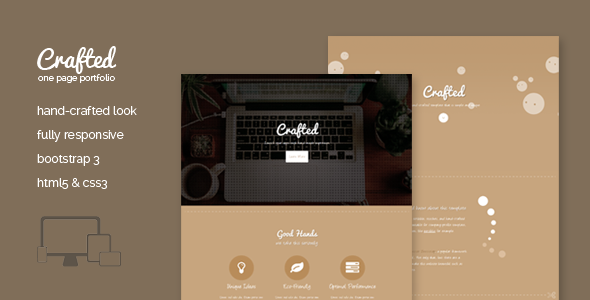
<style>
.page{position:relative;width:590px;height:300px;background:#806e59}
.page>*{position:absolute;margin:0}
.t1{font:24px "Pacifico";color:#ffffff}
.t2{font:9px "Raleway-Regular";color:#ffffff}
.t3{font:12px/24px "Raleway-Regular";color:#ffffff}
</style>
<div class="page">
<p class="t1" style="left:37px;top:46px;width:80px;height:28px">Crafted</p>
<p class="t2" style="left:38px;top:74px;width:77px;height:9px">one page portfolio</p>
<p class="t3" style="left:37px;top:106px;width:100px;height:83px">hand-crafted look<br>fully responsive<br>bootstrap 3<br>html5 &amp; css3</p>
</div>
